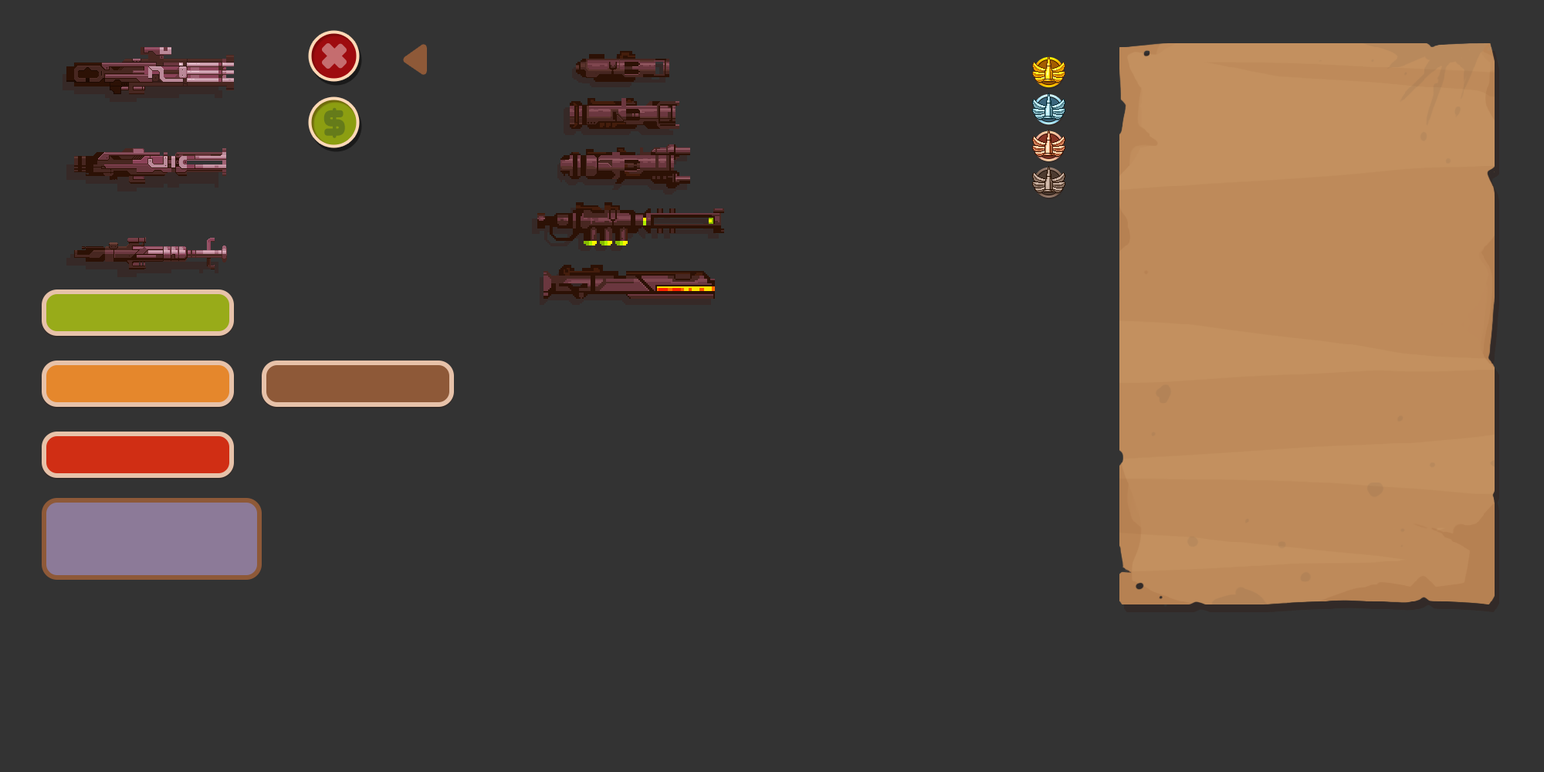
<style>
.page{position:relative;width:1544px;height:772px;background:#333333}
.page>*{position:absolute;margin:0}
.t1{font:42.7px "Junegull";color:#657b1a}
</style>
<div class="page">
<p class="t1" style="left:324px;top:107px;width:21px;height:31px">$</p>
</div>
